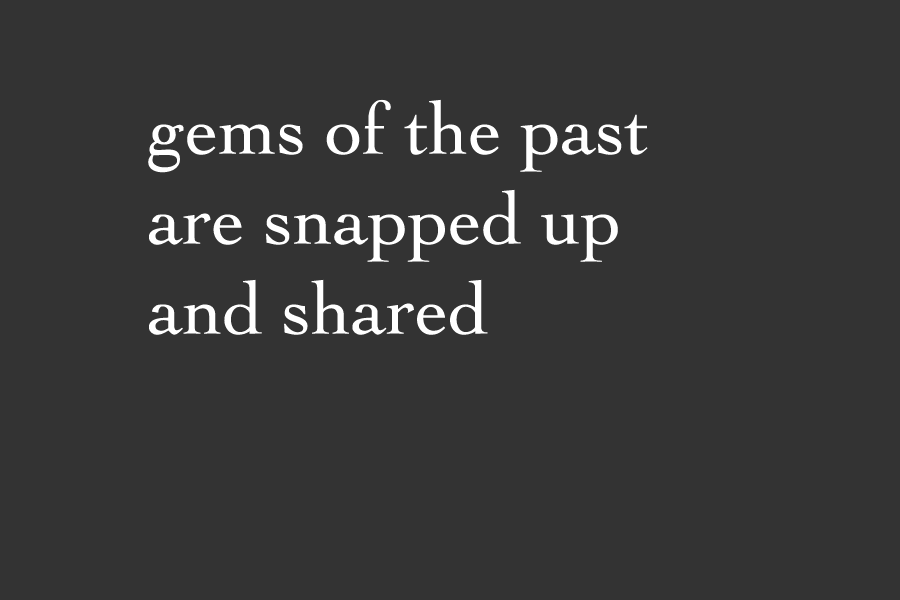
<style>
.page{position:relative;width:900px;height:600px;background:#333333}
.page>*{position:absolute;margin:0}
.t1{font:75px "Cochin";color:#ffffff}
</style>
<div class="page">
<p class="t1" style="left:148px;top:99px;width:500px;height:236px">gems of the past are snapped up<br>and shared</p>
</div>
